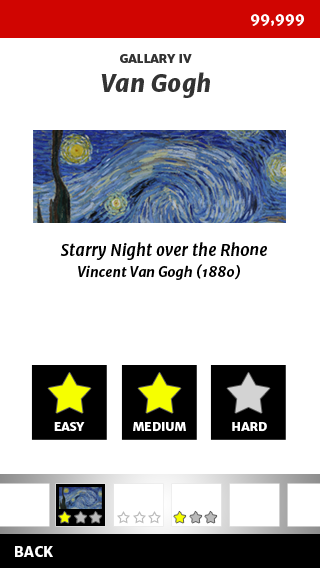
<style>
.page{position:relative;width:320px;height:568px;background:#ffffff}
.page>*{position:absolute;margin:0}
.t1{font:14px "MerriweatherSans-ExtraBold";color:#ffffff}
.t2{font:12px "MerriweatherSans-ExtraBold";color:#333333}
.t3{font:24px "MerriweatherSans-ExtraBldItalic";color:#333333}
.t4{font:16px "MerriweatherSans-BoldItalic";color:#000000}
.t5{font:16px "MerriweatherSans-BoldItalic";color:#ffffff}
.t6{font:14px "MerriweatherSans-BoldItalic";color:#000000}
.t7{font:12px "MerriweatherSans-ExtraBold";color:#ffffff}
</style>
<div class="page">
<p class="t1" style="left:251px;top:14px;width:53px;height:12px">99,999</p>
<p class="t2" style="left:120px;top:54px;width:72px;height:9px">GALLARY IV</p>
<p class="t3" style="left:101px;top:72px;width:109px;height:26px">Van Gogh</p>
<p class="t4" style="left:52px;top:242px;width:215px;height:18px"><span class="t5">S</span>Starry Night over the Rhone</p>
<p class="t6" style="left:78px;top:264px;width:162px;height:16px">Vincent Van Gogh (1880)</p>
<p class="t7" style="left:54px;top:422px;width:31px;height:9px">EASY</p>
<p class="t7" style="left:133px;top:422px;width:53px;height:10px">MEDIUM</p>
<p class="t7" style="left:232px;top:422px;width:35px;height:10px">HARD</p>
<p class="t1" style="left:15px;top:546px;width:38px;height:11px">BACK</p>
</div>
